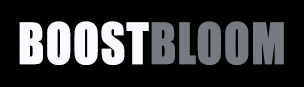
<style>
.page{position:relative;width:304px;height:87px;background:#000000}
.page>*{position:absolute;margin:0}
.t1{font:52.5px "Impact";color:#fafbfe;font-weight:bold;scale:0.91 1}
.t2{font:52.5px "Impact";color:#767b83;font-weight:bold;scale:0.91 1}
</style>
<div class="page">
<p class="t1" style="left:19px;top:21px;width:265px;height:44px">BOOST<span class="t2">BLOOM</span></p>
</div>
